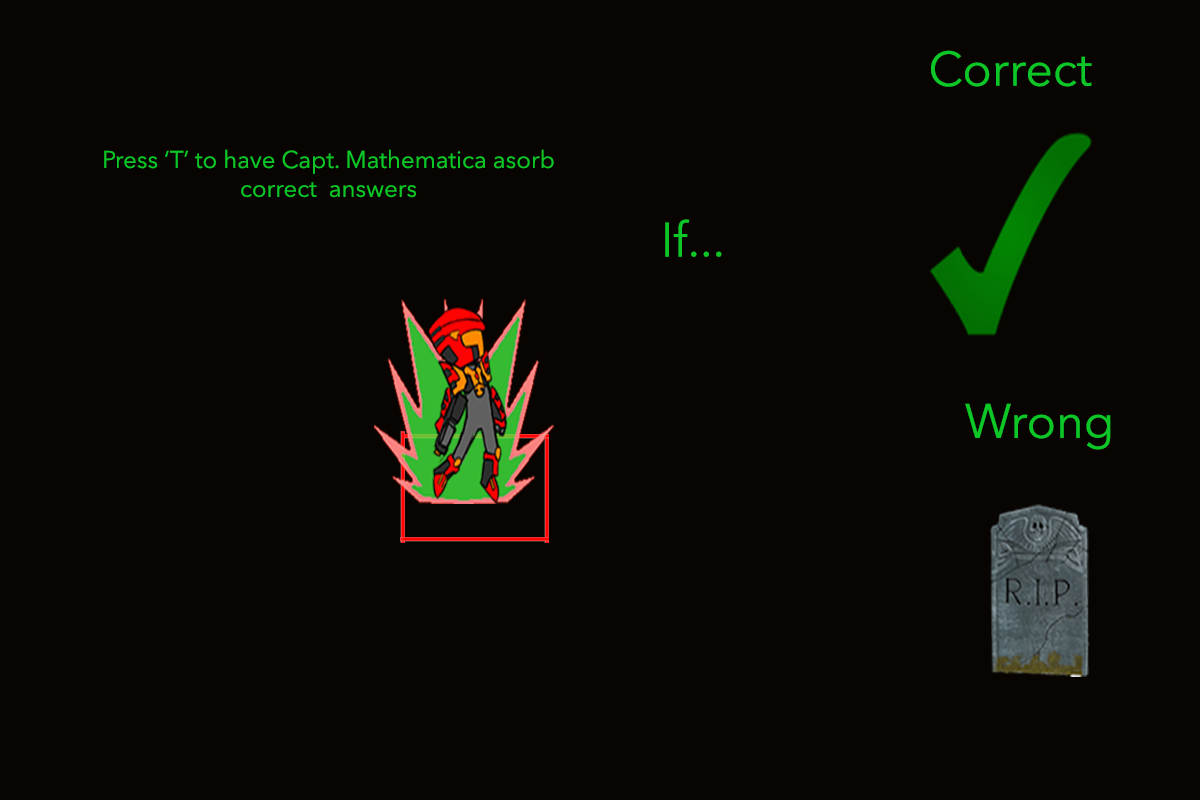
<style>
.page{position:relative;width:1200px;height:800px;background:#070401}
.page>*{position:absolute;margin:0}
.t1{font:48px "AvenirNext-Regular";color:#0cc727}
.t2{font:24px "AvenirNext-Regular";color:#0cc727}
</style>
<div class="page">
<p class="t1" style="left:931px;top:50px;width:161px;height:37px">Correct</p>
<p class="t2" style="left:104px;top:149px;width:450px;height:49px;text-align:center">Press ‘T’ to have Capt. Mathematica asorb <br>correct  answers</p>
<p class="t1" style="left:665px;top:219px;width:57px;height:38px">If...</p>
<p class="t1" style="left:965px;top:403px;width:146px;height:47px">Wrong</p>
</div>
